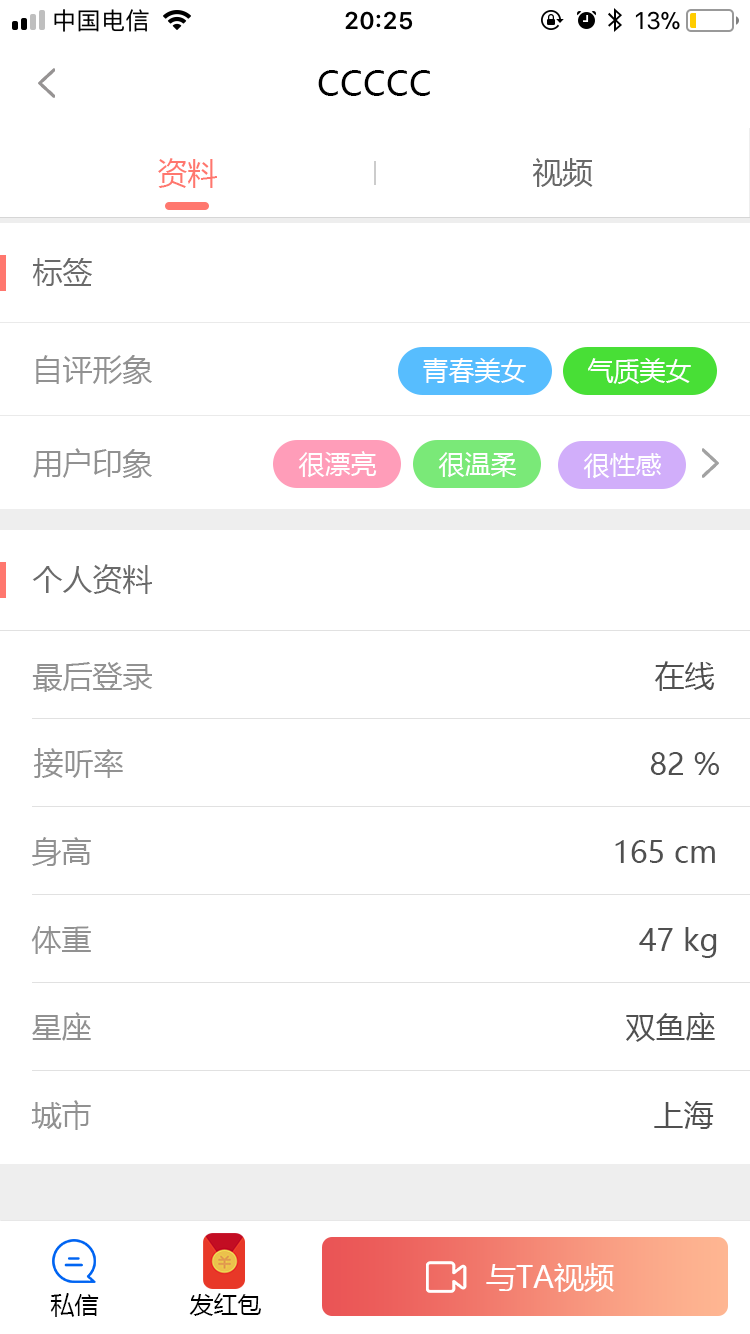
<style>
.page{position:relative;width:750px;height:1334px;background:#ffffff}
.page>*{position:absolute;margin:0}
.t1{font:34px "MicrosoftYaHei";letter-spacing:0.01em;color:#000000}
.t2{font:30px "MicrosoftYaHei";color:#ff776e}
.t3{font:30px "MicrosoftYaHei";color:#696969}
.t4{font:30px "MicrosoftYaHei";color:#6a6a6a}
.t5{font:30px "MicrosoftYaHei";color:#919191}
.t6{font:26px "MicrosoftYaHei";color:#ffffff}
.t7{font:30px "MicrosoftYaHei";color:#505050}
.t8{font:30px "MicrosoftYaHei";color:#ffffff}
.t9{font:24px "MicrosoftYaHei";color:#000000}
</style>
<div class="page">
<p class="t1" style="left:318px;top:70px;width:112px;height:26px">CCCCC</p>
<p class="t2" style="left:158px;top:158px;width:59px;height:30px">资料</p>
<p class="t3" style="left:533px;top:158px;width:60px;height:29px">视频</p>
<p class="t4" style="left:33px;top:258px;width:59px;height:28px">标签</p>
<p class="t5" style="left:36px;top:355px;width:116px;height:29px">自评形象</p>
<p class="t6" style="left:423px;top:358px;width:103px;height:25px">青春美女</p>
<p class="t6" style="left:588px;top:358px;width:103px;height:26px">气质美女</p>
<p class="t5" style="left:33px;top:448px;width:119px;height:30px">用户印象</p>
<p class="t6" style="left:298px;top:451px;width:79px;height:27px">很漂亮</p>
<p class="t6" style="left:438px;top:452px;width:78px;height:26px">很温柔</p>
<p class="t6" style="left:583px;top:453px;width:78px;height:26px">很性感</p>
<p class="t4" style="left:32px;top:564px;width:120px;height:30px">个人资料</p>
<p class="t5" style="left:32px;top:662px;width:121px;height:30px">最后登录</p>
<p class="t7" style="left:654px;top:661px;width:61px;height:30px">在线</p>
<p class="t5" style="left:34px;top:748px;width:89px;height:30px">接听率</p>
<p class="t7" style="left:650px;top:752px;width:69px;height:23px">82 %</p>
<p class="t5" style="left:32px;top:837px;width:59px;height:29px">身高</p>
<p class="t7" style="left:615px;top:840px;width:100px;height:23px">165 cm</p>
<p class="t5" style="left:31px;top:926px;width:60px;height:28px">体重</p>
<p class="t7" style="left:639px;top:927px;width:78px;height:31px">47 kg</p>
<p class="t5" style="left:32px;top:1012px;width:59px;height:29px">星座</p>
<p class="t7" style="left:626px;top:1012px;width:89px;height:30px">双鱼座</p>
<p class="t5" style="left:31px;top:1100px;width:60px;height:30px">城市</p>
<p class="t7" style="left:654px;top:1101px;width:60px;height:28px">上海</p>
<p class="t8" style="left:486px;top:1263px;width:128px;height:29px">与TA视频</p>
<p class="t9" style="left:50px;top:1293px;width:49px;height:24px">私信</p>
<p class="t9" style="left:189px;top:1293px;width:72px;height:23px">发红包</p>
</div>
